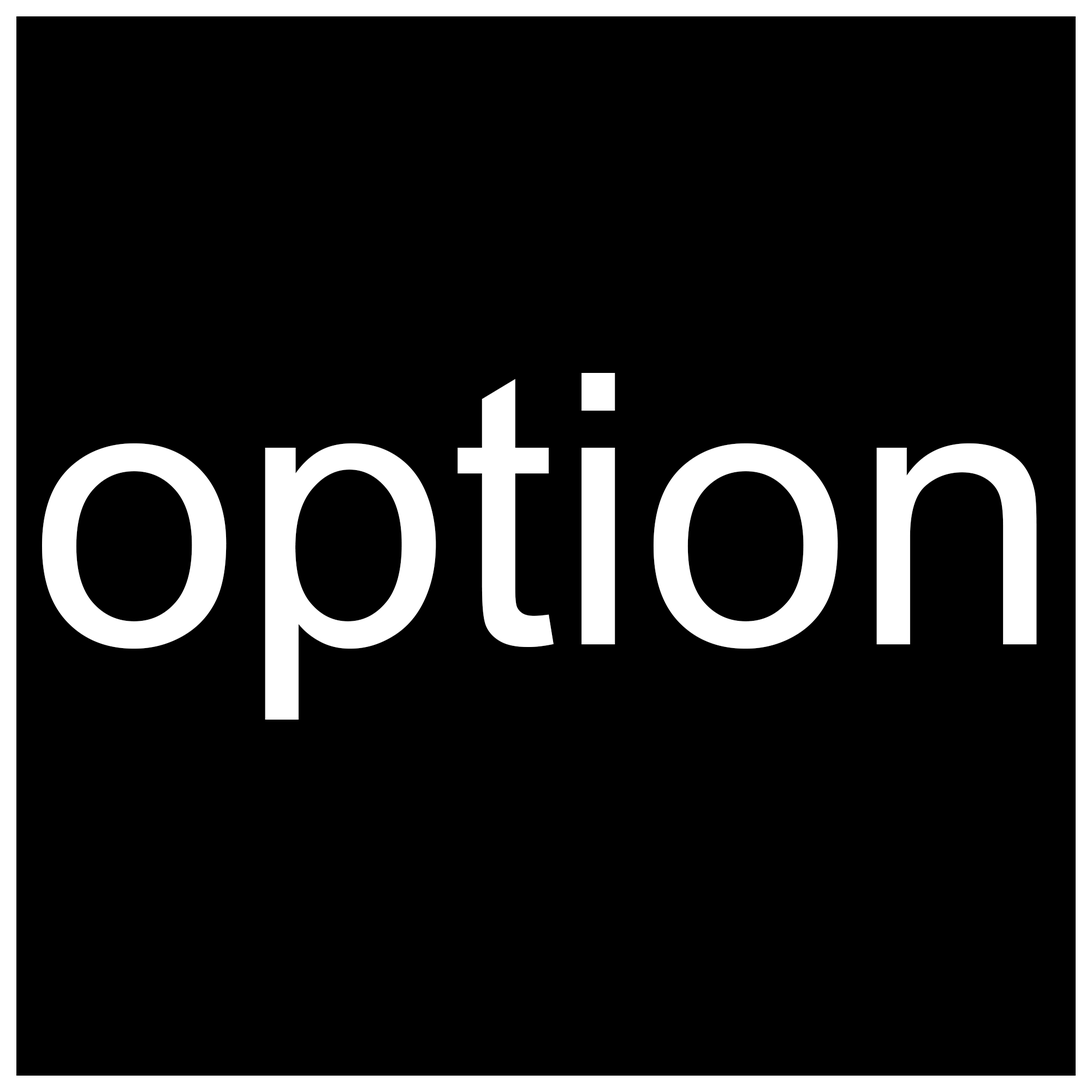
<style>
.page{position:relative;width:1092px;height:1092px;background:#000000}
.page>*{position:absolute;margin:0}
.t1{font:379.2px "ArialMT";color:#ffffff}
</style>
<div class="page">
<p class="t1" style="left:42px;top:373px;width:995px;height:347px">option</p>
</div>
